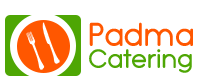
<style>
.page{position:relative;width:200px;height:82px;background:#ffffff}
.page>*{position:absolute;margin:0}
.t1{font:25.5px/22.3px "TypoGroteskRounded";color:#4ea604}
.t2{font:31.5px/22.3px "TypoGroteskRounded";color:#ff5700}
</style>
<div class="page">
<p class="t1" style="left:89px;top:22px;width:104px;height:51px"><span class="t2">Padma<br></span>Catering</p>
</div>
